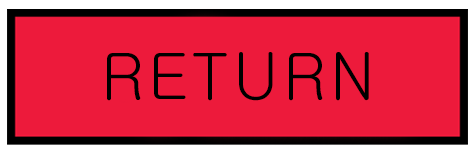
<style>
.page{position:relative;width:475px;height:153px;background:#ed1a3b}
.page>*{position:absolute;margin:0}
.t1{font:64px "Gulim";letter-spacing:0.065em;color:#000000}
</style>
<div class="page">
<p class="t1" style="left:107px;top:52px;width:262px;height:49px">RETURN</p>
</div>
